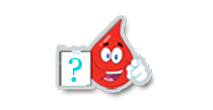
<style>
.page{position:relative;width:213px;height:110px;background:#ffffff}
.page>*{position:absolute;margin:0}
.t1{font:35px "Georgia";color:#00d8df}
</style>
<div class="page">
<p class="t1" style="left:68px;top:58px;width:14px;height:24px">?</p>
</div>
